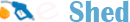
<style>
.page{position:relative;width:130px;height:22px;background:#ffffff}
.page>*{position:absolute;margin:0}
.t1{font:35.7px "MyriadPro-Regular";color:#fcf6f6;scale:1.38 1}
.t2{font:31.2px "BritannicBold";color:#5ca9d4;scale:0.91 1}
.t3{font:31.2px "MyriadPro-Regular";color:#fcf6f6;scale:0.91 1}
.t4{font:20.8px "MyriadPro-Regular";color:#fcf6f6;scale:0.91 1}
</style>
<div class="page">
<p class="t1" style="left:36px;top:2px;width:24px;height:19px;rotate:-25deg">e</p>
<p class="t2" style="left:66px;top:0px;width:63px;height:22px"><span class="t3">     </span><span class="t4">-</span>Shed</p>
</div>
